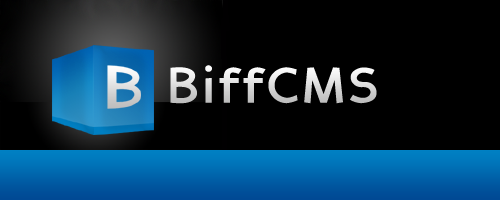
<style>
.page{position:relative;width:500px;height:200px;background:#000000}
.page>*{position:absolute;margin:0}
.t1{font:50px "PerspectiveSansBold";letter-spacing:0.05em}
</style>
<div class="page">
<p class="t1" style="left:170px;top:65px;width:207px;height:39px">BiffCMS</p>
</div>
